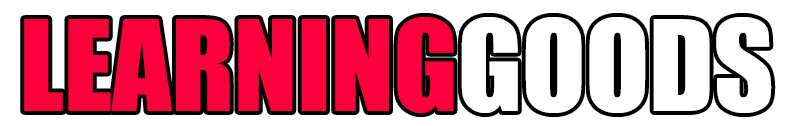
<style>
.page{position:relative;width:792px;height:126px;background:#ffffff}
.page>*{position:absolute;margin:0}
.t1{font:116.4px "Impact";color:#fd003b}
.t2{font:116.4px "Impact";color:#ffffff}
</style>
<div class="page">
<p class="t1" style="left:24px;top:17px;width:748px;height:96px">LEARNING<span class="t2">GOODS</span></p>
</div>
